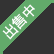
<style>
.page{position:relative;width:54px;height:54px;background:#333333}
.page>*{position:absolute;margin:0}
.t1{font:14px "HiraginoSansGB-W3";color:#ffffff}
</style>
<div class="page">
<p class="t1" style="left:2px;top:4px;width:33px;height:36px;rotate:-46deg">出售中</p>
</div>
